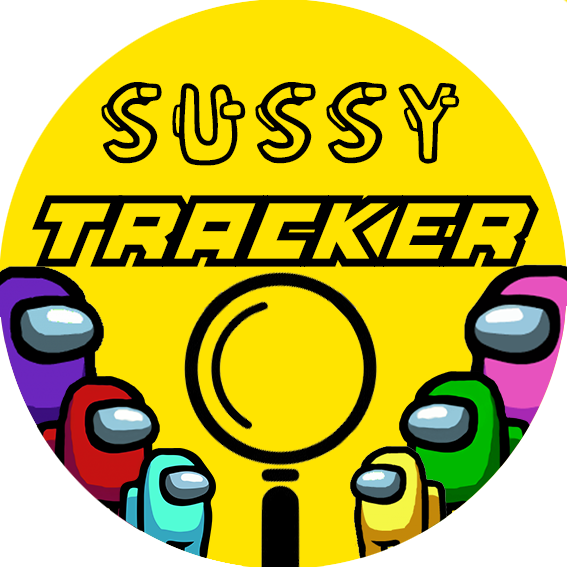
<style>
.page{position:relative;width:567px;height:567px;background:#ffe400}
.page>*{position:absolute;margin:0}
.t1{font:97px "AmongUs-Regular";color:#000000}
.t2{font:74px "FullPack2025";color:#000000}
</style>
<div class="page">
<p class="t1" style="left:101px;top:82px;width:359px;height:84px">SUSSY</p>
<p class="t2" style="left:32px;top:195px;width:507px;height:72px">TRACKER</p>
</div>
